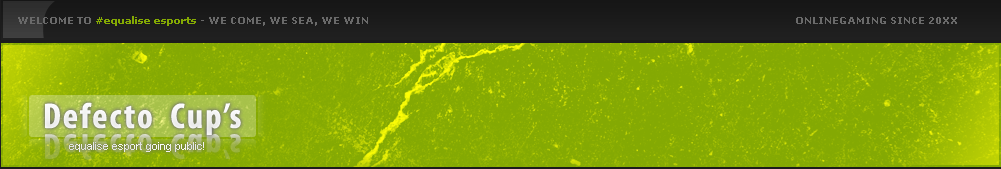
<style>
.page{position:relative;width:1001px;height:169px}
.page>*{position:absolute;margin:0}
.t1{font:10px "Verdana-Bold";color:#6a6a6a}
.t2{font:10px "Verdana-Bold";color:#84a903}
.t3{font:36px "MyriadPro-BoldCond";letter-spacing:0.06em;color:#ffffff}
.t4{font:36px "MyriadPro-BoldCond";letter-spacing:0.06em}
.t5{font:11px "ArialMT";color:#e8e8e8}
</style>
<div class="page">
<p class="t1" style="left:18px;top:16px;width:939px;height:10px">WELCOME TO <span class="t2">#equalise esports </span>- WE COME, WE SEA, WE WIN                                                                                                                                              ONLINEGAMING SINCE 20XX</p>
<p class="t3" style="left:45px;top:102px;width:196px;height:33px">Defecto  Cup’s</p>
<p class="t4" style="left:45px;top:127px;width:196px;height:33px">Defecto  Cup’s</p>
<p class="t5" style="left:69px;top:142px;width:135px;height:10px">equalise esport going public!</p>
</div>
